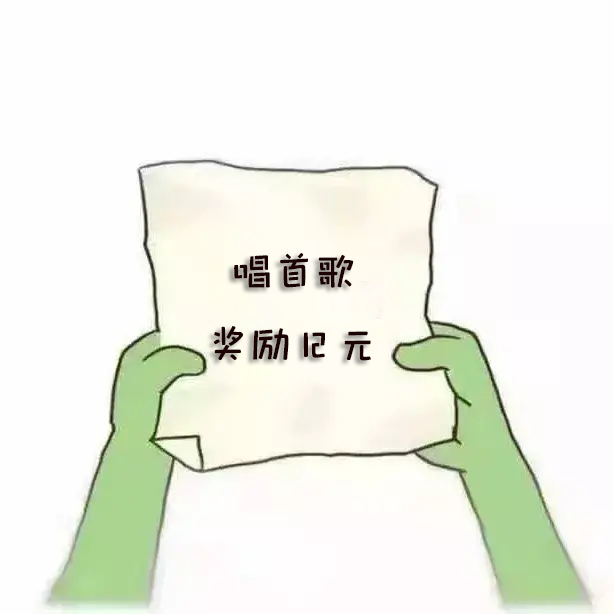
<style>
.page{position:relative;width:614px;height:614px;background:#fefefe}
.page>*{position:absolute;margin:0}
.t1{font:42px "xiaodanchunti";color:#1c0303}
</style>
<div class="page">
<p class="t1" style="left:213px;top:253px;width:158px;height:108px;text-align:center">唱首歌<br>奖励12元</p>
</div>
